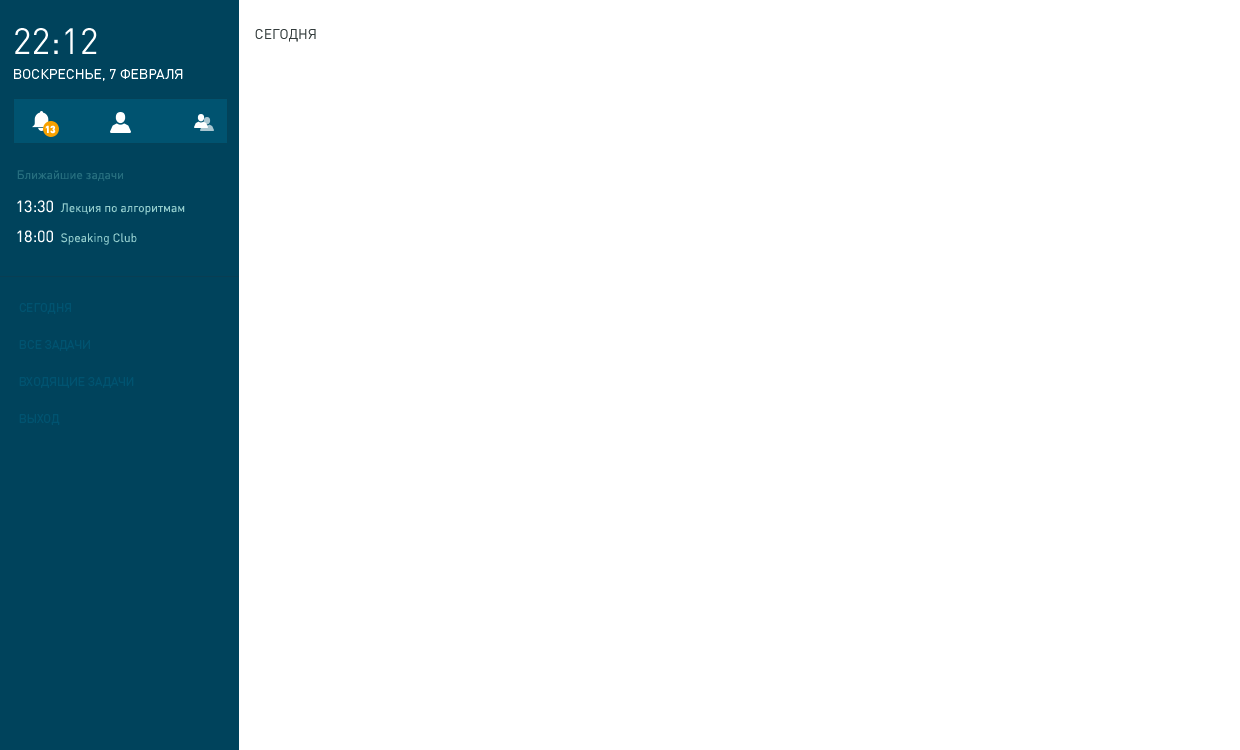
<style>
.page{position:relative;width:1240px;height:750px;background:#ffffff}
.page>*{position:absolute;margin:0}
.t1{font:36px "DINPro-Regular";color:#ffffff;text-transform:uppercase}
.t2{font:14px "DINPro-Regular";color:#343c3c}
.t3{font:14px "DINPro-Regular";color:#ffffff;text-transform:uppercase}
.t4{font:10px "DINPro-Bold";color:#ffffff;text-transform:uppercase}
.t5{font:12px "DINPro-Regular";color:#266e7e}
.t6{font:16px "DINPro-Regular";color:#ffffff}
.t7{font:12px "DINPro-Regular";color:#94cccb}
.t8{font:12px/40px "DINPro-Regular";color:#005370}
</style>
<div class="page">
<p class="t1" style="left:15px;top:28px;width:82px;height:26px">22:12</p>
<p class="t2" style="left:255px;top:29px;width:61px;height:13px">СЕГОДНЯ</p>
<p class="t3" style="left:14px;top:69px;width:169px;height:12px">ВОСКРЕСНЬЕ, 7 февраля</p>
<p class="t4" style="left:45px;top:125px;width:11px;height:9px">13</p>
<p class="t5" style="left:17px;top:170px;width:106px;height:11px">Ближайшие задачи</p>
<p class="t6" style="left:17px;top:200px;width:36px;height:13px">13:30</p>
<p class="t7" style="left:60px;top:203px;width:125px;height:12px">Лекция по алгоритмам</p>
<p class="t6" style="left:17px;top:230px;width:36px;height:13px">18:00</p>
<p class="t7" style="left:61px;top:233px;width:76px;height:12px">Speaking Club</p>
<p class="t8" style="left:19px;top:303px;width:115px;height:122px">СЕГОДНЯ<br>ВСЕ ЗАДАЧИ<br>ВХОДЯЩИЕ ЗАДАЧИ<br>ВЫХОД</p>
</div>
